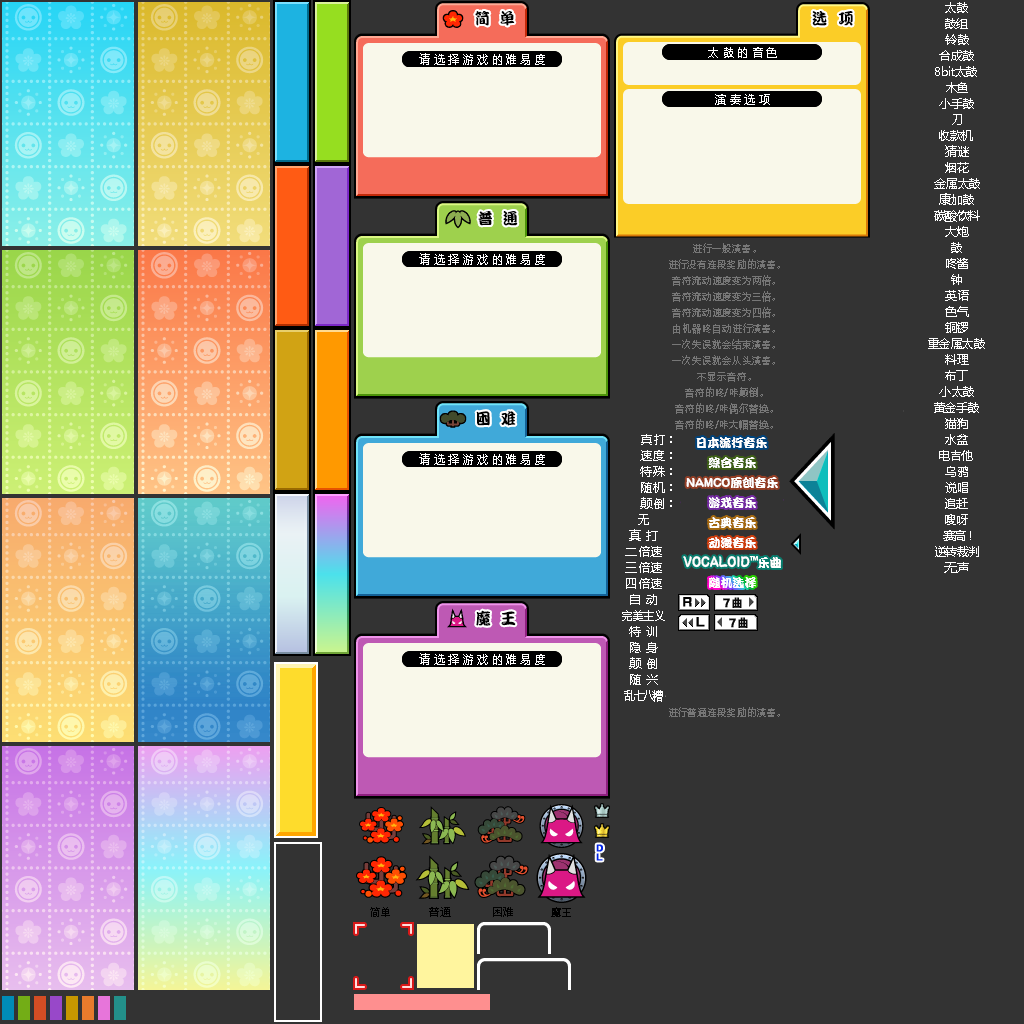
<style>
.page{position:relative;width:1024px;height:1024px;background:#333333}
.page>*{position:absolute;margin:0}
.t1{font:12px "MicrosoftYaHei";letter-spacing:-0.05em;color:#ffffff}
.t2{font:16px "DFPKanTingLiuW9";color:#000000;scale:0.95 1}
.t3{font:12px "MicrosoftYaHei";letter-spacing:0.3em;color:#ffffff;scale:0.95 1}
.t4{font:10px "MicrosoftYaHei";letter-spacing:0.1em;color:#777777;scale:0.9 1}
.t5{font:10px "ZpixEX2";letter-spacing:0.1em;color:#777777;scale:0.9 1}
.t6{font:12px "ZpixEX2";letter-spacing:0.05em;color:#ffffff}
.t7{font:12px "DFPKanTingLiuW9";color:#ffffff}
.t8{font:12px "MicrosoftYaHei";letter-spacing:0.05em;color:#ffffff}
.t9{font:13.2px "DFPKanTingLiuW9";color:#ffffff;scale:0.91 1}
.t10{font:15.6px "DFPKanTingLiuW9";color:#ffffff;scale:0.77 1}
.t11{font:14.4px "AdobeHeitiStd-Regular";color:#ffffff;scale:0.83 1}
.t12{font:12px "MicrosoftYaHei";color:#ffffff;scale:0.9 1}
.t13{font:12px "MicrosoftYaHei";letter-spacing:-0.14em;color:#ffffff;scale:0.9 1}
.t14{font:11px "ZpixEX2";letter-spacing:-0.02em;color:#000000}
.t15{font:11px "MicrosoftYaHei";letter-spacing:0.1em;color:#000000;scale:0.95 1}
.t16{font:11px "MicrosoftYaHei";letter-spacing:0.1em;color:#000000}
.t17{font:11px "MicrosoftYaHei";letter-spacing:0.05em;color:#000000;scale:0.95 1}
.t18{font:11px "ZpixEX2";color:#000000;scale:0.95 1}
</style>
<div class="page">
<p class="t1" style="left:945px;top:2px;width:23px;height:11px">太鼓</p>
<p class="t2" style="left:475px;top:11px;width:40px;height:15px">简  单</p>
<p class="t2" style="left:812px;top:11px;width:41px;height:15px">选   项</p>
<p class="t1" style="left:945px;top:18px;width:23px;height:11px">鼓组</p>
<p class="t1" style="left:945px;top:34px;width:24px;height:11px">铃鼓</p>
<p class="t3" style="left:419px;top:53px;width:126px;height:12px">请选择游戏的难易度</p>
<p class="t3" style="left:708px;top:47px;width:69px;height:11px">太鼓的音色</p>
<p class="t1" style="left:939px;top:50px;width:35px;height:11px">合成鼓</p>
<p class="t1" style="left:935px;top:66px;width:42px;height:11px">8bit太鼓</p>
<p class="t1" style="left:946px;top:82px;width:22px;height:11px">木鱼</p>
<p class="t3" style="left:715px;top:94px;width:55px;height:11px">演奏选项</p>
<p class="t1" style="left:939px;top:98px;width:35px;height:11px">小手鼓</p>
<p class="t1" style="left:952px;top:114px;width:10px;height:11px">刀</p>
<p class="t1" style="left:939px;top:130px;width:34px;height:11px">收款机</p>
<p class="t1" style="left:945px;top:145px;width:24px;height:12px">猜谜</p>
<p class="t1" style="left:945px;top:162px;width:24px;height:11px">烟花</p>
<p class="t1" style="left:934px;top:178px;width:46px;height:11px">金属太鼓</p>
<p class="t1" style="left:939px;top:193px;width:35px;height:12px">康加鼓</p>
<p class="t2" style="left:478px;top:211px;width:40px;height:15px">普  通</p>
<p class="t1" style="left:934px;top:210px;width:46px;height:12px">碳酸饮料</p>
<p class="t1" style="left:945px;top:226px;width:24px;height:11px">大炮</p>
<p class="t4" style="left:693px;top:243px;width:63px;height:10px">进行一般演奏<span class="t5">。</span></p>
<p class="t1" style="left:951px;top:242px;width:11px;height:11px">鼓</p>
<p class="t3" style="left:419px;top:253px;width:126px;height:12px">请选择游戏的难易度</p>
<p class="t4" style="left:669px;top:259px;width:111px;height:10px">进行没有连段奖励的演奏<span class="t5">。</span></p>
<p class="t1" style="left:946px;top:258px;width:22px;height:11px">咚酱</p>
<p class="t4" style="left:672px;top:275px;width:103px;height:11px">音符流动速度变为两倍<span class="t5">。</span></p>
<p class="t1" style="left:951px;top:274px;width:11px;height:11px">钟</p>
<p class="t4" style="left:672px;top:291px;width:103px;height:11px">音符流动速度变为三倍<span class="t5">。</span></p>
<p class="t1" style="left:945px;top:290px;width:24px;height:11px">英语</p>
<p class="t4" style="left:672px;top:307px;width:103px;height:11px">音符流动速度变为四倍<span class="t5">。</span></p>
<p class="t1" style="left:945px;top:306px;width:24px;height:11px">色气</p>
<p class="t4" style="left:673px;top:323px;width:102px;height:11px">由机器咚自动进行演奏<span class="t5">。</span></p>
<p class="t1" style="left:945px;top:322px;width:23px;height:11px">铜锣</p>
<p class="t4" style="left:672px;top:339px;width:103px;height:11px">一次失误就会结束演奏<span class="t5">。</span></p>
<p class="t1" style="left:928px;top:338px;width:57px;height:11px">重金属太鼓</p>
<p class="t4" style="left:672px;top:355px;width:103px;height:10px">一次失误就会从头演奏<span class="t5">。</span></p>
<p class="t1" style="left:945px;top:354px;width:24px;height:11px">料理</p>
<p class="t4" style="left:697px;top:372px;width:54px;height:10px">不显示音符<span class="t5">。</span></p>
<p class="t1" style="left:945px;top:370px;width:23px;height:11px">布丁</p>
<p class="t4" style="left:685px;top:387px;width:78px;height:11px">音符的咚/咔颠倒<span class="t5">。</span></p>
<p class="t1" style="left:939px;top:386px;width:35px;height:11px">小太鼓</p>
<p class="t2" style="left:476px;top:411px;width:40px;height:15px">困  难</p>
<p class="t4" style="left:675px;top:403px;width:98px;height:11px">音符的咚/咔偶尔替换<span class="t5">。</span></p>
<p class="t1" style="left:934px;top:402px;width:45px;height:11px">黄金手鼓</p>
<p class="t4" style="left:675px;top:419px;width:98px;height:11px">音符的咚/咔大幅替换<span class="t5">。</span></p>
<p class="t1" style="left:945px;top:418px;width:23px;height:11px">猫狗</p>
<p class="t6" style="left:641px;top:434px;width:24px;height:11px">真打</p>
<p class="t7" style="left:696px;top:437px;width:71px;height:11px">日本流行音乐</p>
<p class="t1" style="left:945px;top:434px;width:23px;height:11px">水盆</p>
<p class="t3" style="left:419px;top:453px;width:126px;height:12px">请选择游戏的难易度</p>
<p class="t8" style="left:640px;top:450px;width:25px;height:11px">速度</p>
<p class="t7" style="left:708px;top:457px;width:48px;height:11px">综合音乐</p>
<p class="t1" style="left:939px;top:450px;width:34px;height:11px">电吉他</p>
<p class="t8" style="left:640px;top:466px;width:25px;height:11px">特殊</p>
<p class="t1" style="left:945px;top:466px;width:23px;height:11px">乌鸦</p>
<p class="t8" style="left:641px;top:482px;width:24px;height:11px">随机</p>
<p class="t9" style="left:686px;top:477px;width:92px;height:11px">NAMCO<span class="t7">原创音乐</span></p>
<p class="t1" style="left:945px;top:482px;width:23px;height:11px">说唱</p>
<p class="t8" style="left:640px;top:497px;width:24px;height:12px">颠倒</p>
<p class="t7" style="left:709px;top:497px;width:47px;height:11px">游戏音乐</p>
<p class="t1" style="left:945px;top:498px;width:23px;height:11px">追赶</p>
<p class="t6" style="left:638px;top:514px;width:11px;height:11px">无</p>
<p class="t7" style="left:709px;top:517px;width:47px;height:11px">古典音乐</p>
<p class="t1" style="left:945px;top:514px;width:23px;height:11px">嗖呀</p>
<p class="t8" style="left:629px;top:529px;width:29px;height:12px">真 打</p>
<p class="t1" style="left:943px;top:530px;width:28px;height:11px">赛高 !</p>
<p class="t7" style="left:708px;top:537px;width:48px;height:11px">动漫音乐</p>
<p class="t8" style="left:625px;top:546px;width:37px;height:11px">二倍速</p>
<p class="t10" style="left:683px;top:556px;width:98px;height:12px">VOCALOID<span class="t11">™</span><span class="t7">乐曲</span></p>
<p class="t1" style="left:935px;top:546px;width:44px;height:11px">逆转裁判</p>
<p class="t8" style="left:625px;top:562px;width:37px;height:11px">三倍速</p>
<p class="t1" style="left:944px;top:562px;width:25px;height:11px">无声</p>
<p class="t8" style="left:626px;top:578px;width:36px;height:11px">四倍速</p>
<p class="t7" style="left:709px;top:577px;width:47px;height:11px">随机选择</p>
<p class="t8" style="left:630px;top:594px;width:27px;height:11px">自 动</p>
<p class="t2" style="left:476px;top:610px;width:40px;height:16px">魔  王</p>
<p class="t12" style="left:622px;top:610px;width:43px;height:11px">完美主义</p>
<p class="t8" style="left:629px;top:626px;width:28px;height:11px">特 训</p>
<p class="t3" style="left:419px;top:653px;width:126px;height:12px">请选择游戏的难易度</p>
<p class="t8" style="left:630px;top:642px;width:28px;height:11px">隐 身</p>
<p class="t8" style="left:629px;top:657px;width:28px;height:12px">颠 倒</p>
<p class="t8" style="left:630px;top:674px;width:28px;height:11px">随 兴</p>
<p class="t13" style="left:624px;top:690px;width:39px;height:12px">乱七八糟</p>
<p class="t4" style="left:669px;top:707px;width:111px;height:10px">进行普通连段奖励的演奏<span class="t5">。</span></p>
<p class="t14" style="left:370px;top:907px;width:20px;height:10px">简单</p>
<p class="t15" style="left:429px;top:907px;width:22px;height:10px">普<span class="t16">通</span></p>
<p class="t17" style="left:493px;top:907px;width:20px;height:10px">困难</p>
<p class="t18" style="left:551px;top:907px;width:20px;height:10px">魔王</p>
</div>
